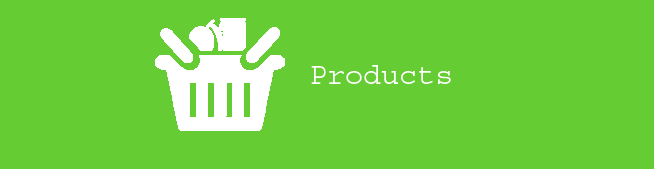
<style>
.page{position:relative;width:654px;height:169px;background:#66cc33}
.page>*{position:absolute;margin:0}
.t1{font:30px "Courier";color:#ffffff}
</style>
<div class="page">
<p class="t1" style="left:311px;top:65px;width:140px;height:19px">Products</p>
</div>
